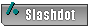
<style>
.page{position:relative;width:89px;height:27px;background:#ffffff}
.page>*{position:absolute;margin:0}
.t1{font:14px "Impact";color:#ffffff}
</style>
<div class="page">
<p class="t1" style="left:26px;top:9px;width:49px;height:11px">Slashdot</p>
</div>
